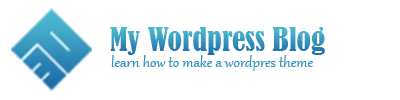
<style>
.page{position:relative;width:400px;height:100px;background:#ffffff}
.page>*{position:absolute;margin:0}
.t1{font:30px "BernardMT-Condensed";color:#3694bd}
.t2{font:18px "Gabriola";color:#3694bd}
</style>
<div class="page">
<p class="t1" style="left:110px;top:27px;width:215px;height:28px">My Wordpress Blog</p>
<p class="t2" style="left:111px;top:55px;width:202px;height:16px">learn how to make a wordpres theme</p>
</div>
